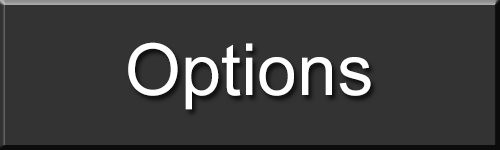
<style>
.page{position:relative;width:500px;height:150px;background:#333333}
.page>*{position:absolute;margin:0}
.t1{font:72px "ArialMT";color:#ffffff}
</style>
<div class="page">
<p class="t1" style="left:128px;top:42px;width:243px;height:68px">Options</p>
</div>
